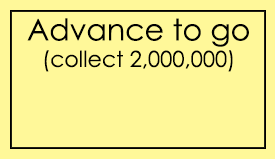
<style>
.page{position:relative;width:275px;height:159px;background:#fff899}
.page>*{position:absolute;margin:0}
.t1{font:22px "CenturyGothic";color:#000000}
.t2{font:30px "CenturyGothic";color:#000000}
</style>
<div class="page">
<p class="t1" style="left:27px;top:18px;width:222px;height:54px;text-align:center"><span class="t2">Advance to go<br></span>(collect 2,000,000)</p>
</div>
